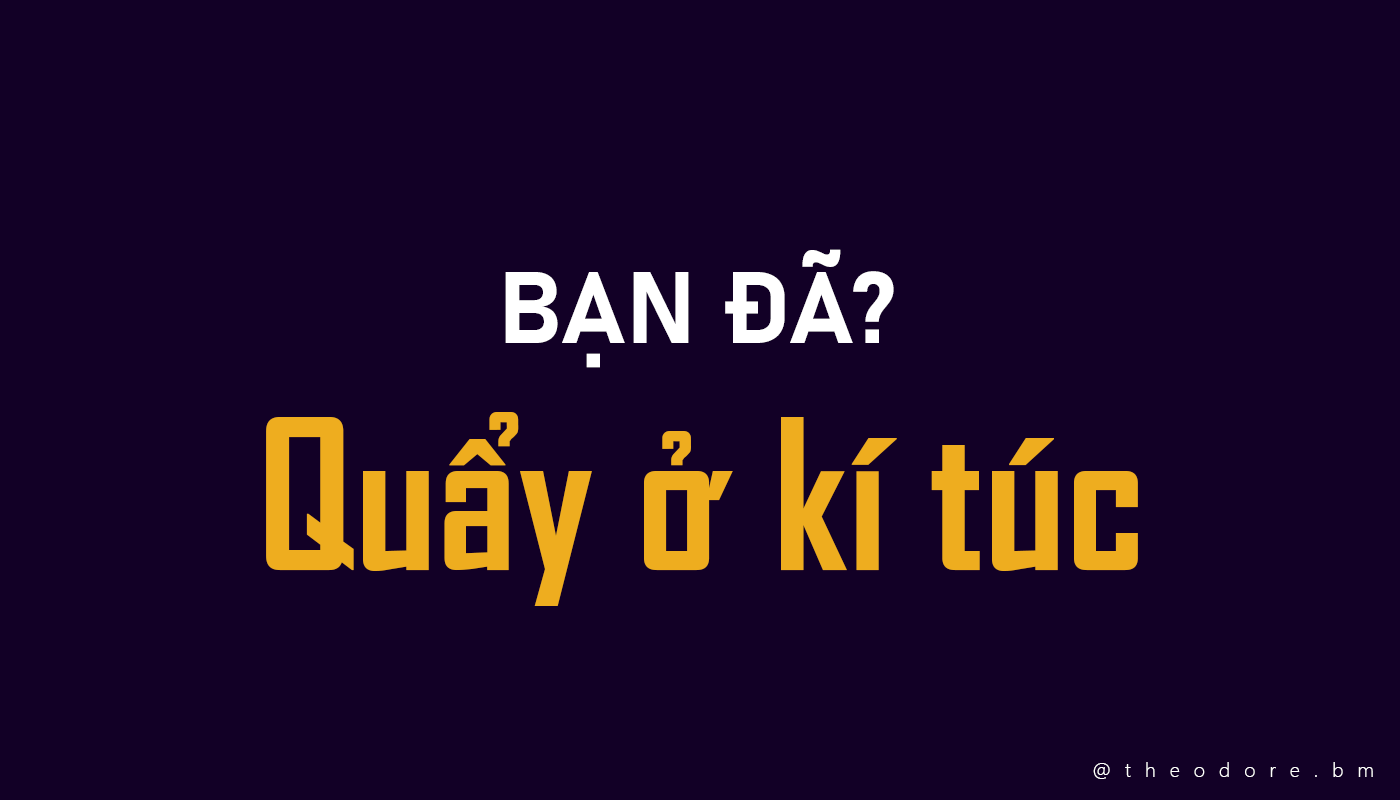
<style>
.page{position:relative;width:1400px;height:800px;background:#120026}
.page>*{position:absolute;margin:0}
.t1{font:100px "Bahnschrift-Bold";color:#ffffff}
.t2{font:200px "SVN-AgencyFBbold";color:#eead1f}
.t3{font:20px "SegoeUI-Light";letter-spacing:0.7em;color:#ffffff}
</style>
<div class="page">
<p class="t1" style="left:505px;top:249px;width:389px;height:119px">BẠN ĐÃ?</p>
<p class="t2" style="left:266px;top:412px;width:872px;height:194px">Quẩy ở kí túc</p>
<p class="t3" style="left:1093px;top:762px;width:280px;height:17px">@theodore.bm</p>
</div>
